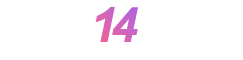
<style>
.page{position:relative;width:243px;height:60px;background:#ffffff}
.page>*{position:absolute;margin:0}
.t1{font:48px "Arial-BoldItalicMT";letter-spacing:-0.05em;color:#d165bc}
</style>
<div class="page">
<p class="t1" style="left:95px;top:7px;width:43px;height:35px">14</p>
</div>
